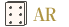
<style>
.page{position:relative;width:69px;height:27px;background:#ffffff}
.page>*{position:absolute;margin:0}
.t1{font:18px "RyuminPro-ExBold";letter-spacing:-0.08em;color:#ae9442;scale:0.9 1}
</style>
<div class="page">
<p class="t1" style="left:33px;top:7px;width:24px;height:14px">AR</p>
</div>
